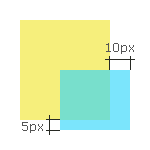
<style>
.page{position:relative;width:150px;height:150px;background:#ffffff}
.page>*{position:absolute;margin:0}
.t1{font:12px "Verdana";color:#555555}
</style>
<div class="page">
<p class="t1" style="left:106px;top:43px;width:28px;height:11px">10px</p>
<p class="t1" style="left:22px;top:122px;width:21px;height:11px">5px</p>
</div>
